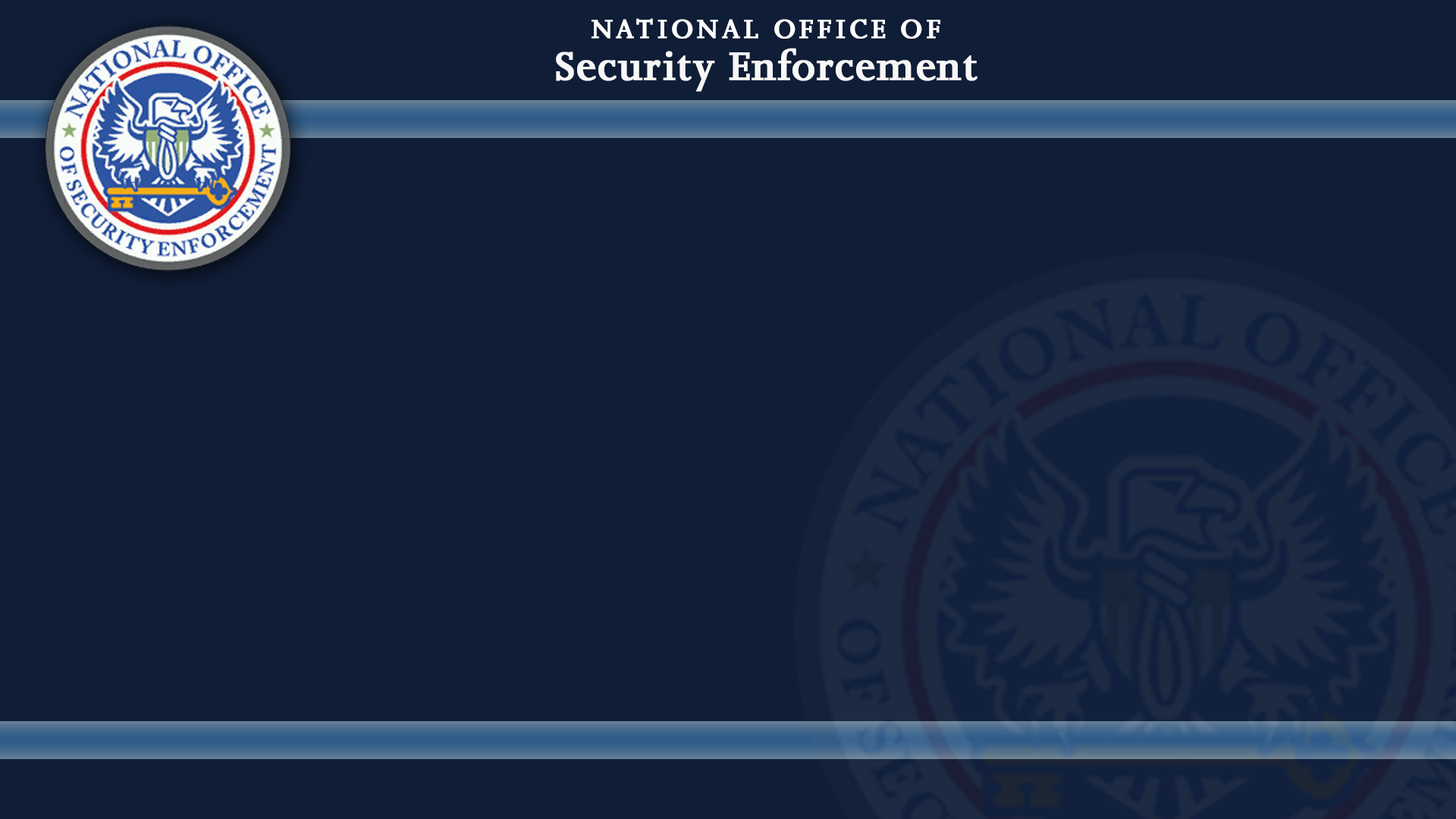
<style>
.page{position:relative;width:1456px;height:819px;background:#0f1d37}
.page>*{position:absolute;margin:0}
.t1{font:30.3px "JoannaMT-SemiBold";letter-spacing:0.1em;color:#ffffff;font-weight:bold}
.t2{font:45.5px "JoannaMT-SemiBold";color:#ffffff;font-weight:bold}
</style>
<div class="page">
<p class="t1" style="left:591px;top:18px;width:349px;height:21px">NATIONAL OFFICE OF</p>
<p class="t2" style="left:556px;top:48px;width:421px;height:44px">Security Enforcement</p>
</div>
